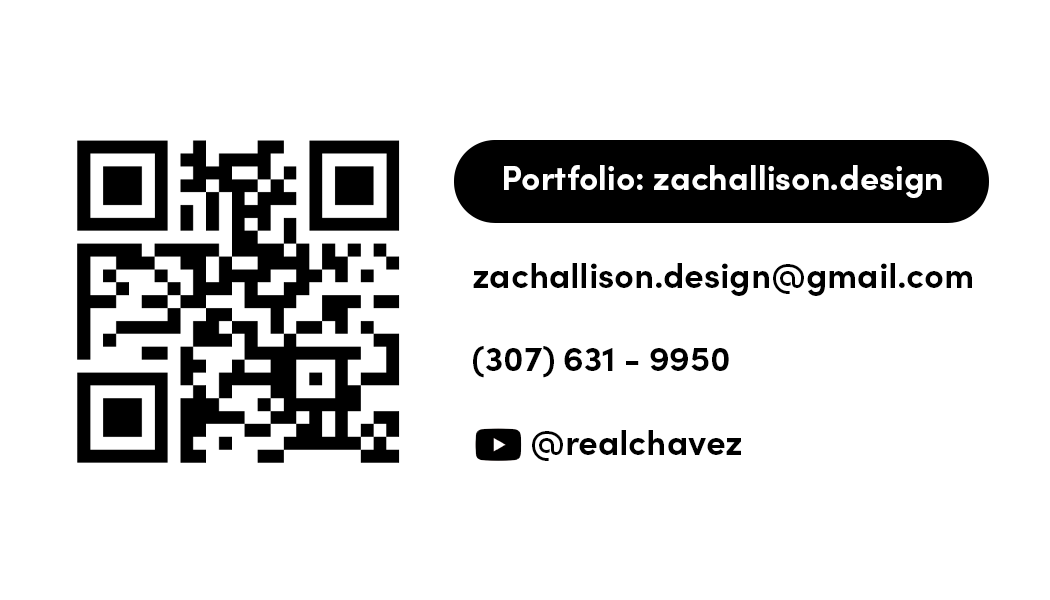
<style>
.page{position:relative;width:1050px;height:600px;background:#ffffff}
.page>*{position:absolute;margin:0}
.t1{font:33.8px "SofiaPro-Bold";color:#ffffff}
.t2{font:34.8px/83.3px "SofiaPro-Bold";color:#000000}
</style>
<div class="page">
<p class="t1" style="left:504px;top:165px;width:438px;height:33px">Portfolio: zachallison.design</p>
<p class="t2" style="left:473px;top:263px;width:499px;height:198px">zachallison.design@gmail.com<br>(307) 631 - 9950<br>       @realchavez</p>
</div>
